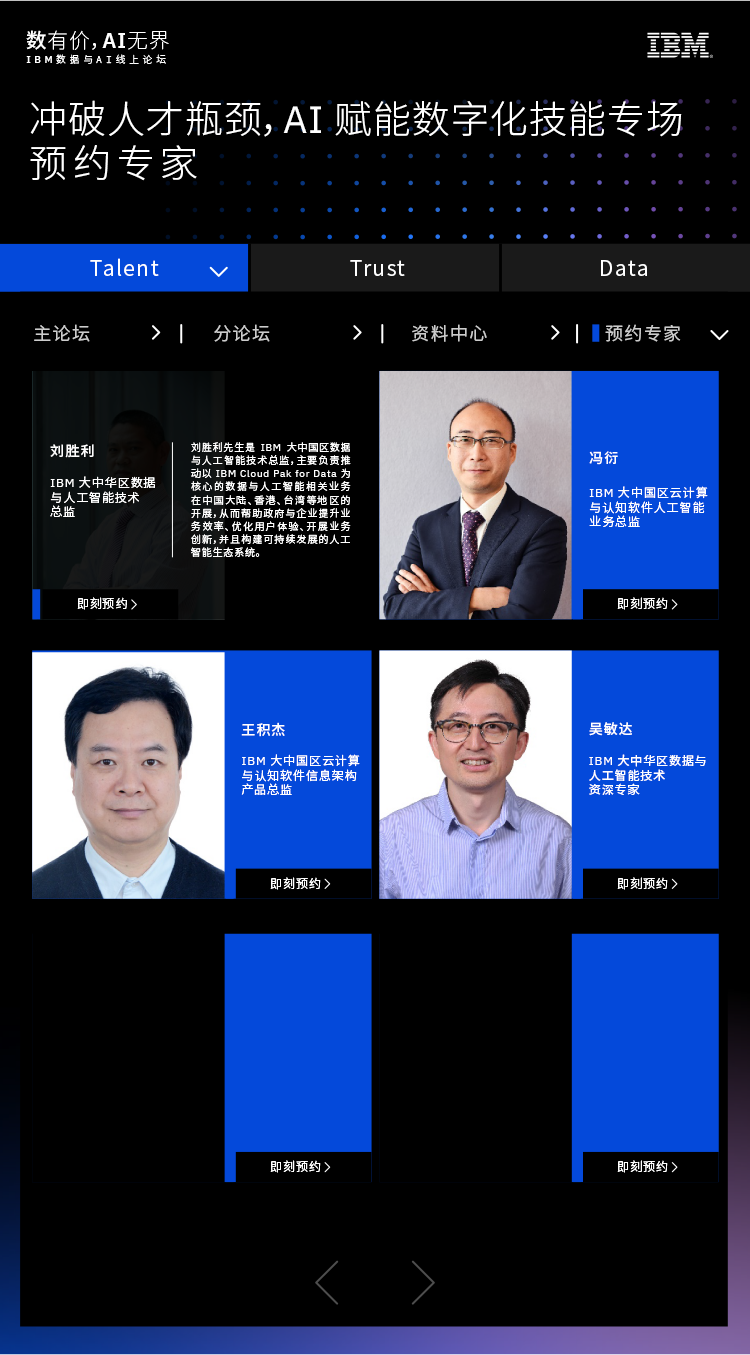
<style>
.page{position:relative;width:750px;height:1355px;background:#000000}
.page>*{position:absolute;margin:0}
.t1{font:20.7px "NotoSansCJKsc-Thin";letter-spacing:0.05em;color:#ffffff}
.t2{font:20.7px "NotoSansCJKsc-Medium";letter-spacing:0.05em;color:#ffffff}
.t3{font:20.7px "NotoSansCJKsc-Light";letter-spacing:0.05em;color:#ffffff}
.t4{font:20.7px "IBMPlexSans-SemiBold";letter-spacing:0.05em;color:#ffffff}
.t5{font:9.8px "NotoSansCJKsc-Light";letter-spacing:0.37em;color:#ffffff}
.t6{font:9.8px "IBMPlexSans-Medium";letter-spacing:0.37em;color:#ffffff}
.t7{font:9.8px "IBMPlexMono-Light";letter-spacing:0.37em;color:#ffffff}
.t8{font:38px "NotoSansCJKsc-Light";letter-spacing:0.025em;color:#ffffff}
.t9{font:38px "IBMPlexSans";letter-spacing:0.025em;color:#ffffff}
.t10{font:38px "NotoSansCJKsc-Light";letter-spacing:0.15em;color:#ffffff}
.t11{font:21px "NotoSansCJKsc-DemiLight";letter-spacing:0.075em;color:#ffffff}
.t12{font:18px "NotoSansCJKsc-DemiLight";letter-spacing:0.075em;color:#cccccc}
.t13{font:14px "NotoSansCJKsc-Medium";letter-spacing:0.075em;color:#ffffff}
.t14{font:10px/13.1px "NotoSansCJKsc-DemiLight";letter-spacing:0.075em;color:#ffffff}
.t15{font:10px/13.1px "IBMPlexSans";letter-spacing:0.075em;color:#ffffff}
.t16{font:12px "NotoSansCJKsc-DemiLight";letter-spacing:0.075em;color:#ffffff}
.t17{font:12px "IBMPlexSans";letter-spacing:0.075em;color:#ffffff}
.t18{font:12px "NotoSansCJKsc-Regular";letter-spacing:0.075em;color:#ffffff}
</style>
<div class="page">
<p class="t1" style="left:26px;top:30px;width:143px;height:20px"><span class="t2">数</span>有价<span class="t3">，</span><span class="t4">AI</span>无界</p>
<p class="t5" style="left:26px;top:54px;width:140px;height:10px"><span class="t6">IBM</span>数据与<span class="t7">AI</span>线上论坛</p>
<p class="t8" style="left:30px;top:100px;width:652px;height:37px">冲破人才瓶颈，<span class="t9">AI </span>赋能数字化技能专场</p>
<p class="t10" style="left:30px;top:145px;width:167px;height:36px">预约专家</p>
<p class="t11" style="left:90px;top:258px;width:69px;height:18px">Talent</p>
<p class="t11" style="left:350px;top:260px;width:55px;height:16px">Trust</p>
<p class="t11" style="left:601px;top:260px;width:46px;height:16px">Data</p>
<p class="t12" style="left:34px;top:324px;width:56px;height:18px">主论坛</p>
<p class="t12" style="left:214px;top:324px;width:56px;height:18px">分论坛</p>
<p class="t12" style="left:412px;top:324px;width:75px;height:18px">资料中心</p>
<p class="t12" style="left:605px;top:324px;width:76px;height:18px">预约专家</p>
<p class="t13" style="left:50px;top:444px;width:44px;height:14px">刘胜利</p>
<p class="t14" style="left:191px;top:442px;width:160px;height:115px;text-align:justify">刘胜利先生是<span class="t15"> IBM </span>大中国区数据与人工智能技术总监，主要负责推动以<span class="t15"> IBM Cloud Pak for Data </span>为核心的数据与人工智能相关业务在中国大陆、香港、台湾等地区的开展，从而帮助政府与企业提升业务效率、优化用户体验、开展业务创新，并且构建可持续发展的人工智能生态系统。</p>
<p class="t13" style="left:589px;top:451px;width:29px;height:14px">冯衍</p>
<p class="t16" style="left:50px;top:476px;width:106px;height:41px"><span class="t17">IBM</span> 大中华区数据<br>与人工智能技术<br>总监</p>
<p class="t16" style="left:589px;top:486px;width:119px;height:41px"><span class="t17">IBM </span>大中国区云计算<br>与认知软件人工智能<br>业务总监</p>
<p class="t16" style="left:77px;top:597px;width:50px;height:13px">即刻预约</p>
<p class="t16" style="left:617px;top:597px;width:51px;height:13px">即刻预约</p>
<p class="t13" style="left:241px;top:722px;width:44px;height:15px">王积杰</p>
<p class="t13" style="left:589px;top:722px;width:43px;height:14px">吴敏达</p>
<p class="t16" style="left:241px;top:754px;width:119px;height:41px"><span class="t17">IBM </span>大中国区云计算<br>与认知软件信息架构<br>产品总监</p>
<p class="t18" style="left:589px;top:754px;width:117px;height:41px"><span class="t17">IBM</span> 大中华区数据与<br>人工智能技术<br>资深专家</p>
<p class="t16" style="left:270px;top:877px;width:51px;height:13px">即刻预约</p>
<p class="t16" style="left:617px;top:877px;width:51px;height:13px">即刻预约</p>
<p class="t16" style="left:270px;top:1160px;width:51px;height:13px">即刻预约</p>
<p class="t16" style="left:617px;top:1160px;width:51px;height:13px">即刻预约</p>
</div>
